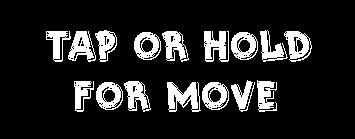
<style>
.page{position:relative;width:355px;height:139px;background:#000000}
.page>*{position:absolute;margin:0}
.t1{font:41.7px "Shoescenter";color:#ffffff}
</style>
<div class="page">
<p class="t1" style="left:46px;top:30px;width:266px;height:82px">Tap or hold<br>    for move</p>
</div>
